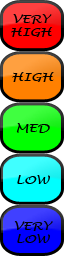
<style>
.page{position:relative;width:64px;height:256px}
.page>*{position:absolute;margin:0}
.t1{font:11.3px "LucidaHandwriting-Italic";color:#000000;scale:1.25 1}
</style>
<div class="page">
<p class="t1" style="left:11px;top:14px;width:42px;height:23px;text-align:center">VERY<br>HIGH</p>
<p class="t1" style="left:12px;top:72px;width:42px;height:10px">HIGH</p>
<p class="t1" style="left:16px;top:123px;width:34px;height:10px">MED</p>
<p class="t1" style="left:17px;top:175px;width:33px;height:9px">LOW</p>
<p class="t1" style="left:14px;top:221px;width:39px;height:22px;text-align:center">VERY<br>LOW</p>
</div>
